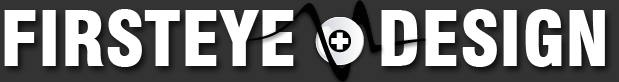
<style>
.page{position:relative;width:619px;height:82px;background:#ffffff}
.page>*{position:absolute;margin:0}
.t1{font:75px "Swiss721BT-BlackCondensed";color:#ffffff}
</style>
<div class="page">
<p class="t1" style="left:4px;top:9px;width:601px;height:58px">FIRSTEYE    DESIGN</p>
</div>
